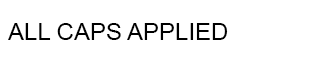
<style>
.page{position:relative;width:320px;height:64px;background:#ffffff}
.page>*{position:absolute;margin:0}
.t1{font:24px "ArialMT";color:#000000;text-transform:uppercase}
</style>
<div class="page">
<p class="t1" style="left:8px;top:23px;width:220px;height:17px">All Caps Applied</p>
</div>
